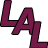
<style>
.page{position:relative;width:48px;height:48px;background:#ffffff}
.page>*{position:absolute;margin:0}
.t1{font:35px "DejaVuSansCondensed-BoldOblique";color:#741b47}
</style>
<div class="page">
<p class="t1" style="left:0px;top:0px;width:18px;height:26px">L</p>
<p class="t1" style="left:12px;top:8px;width:24px;height:26px">A</p>
<p class="t1" style="left:30px;top:22px;width:18px;height:26px">L</p>
</div>
